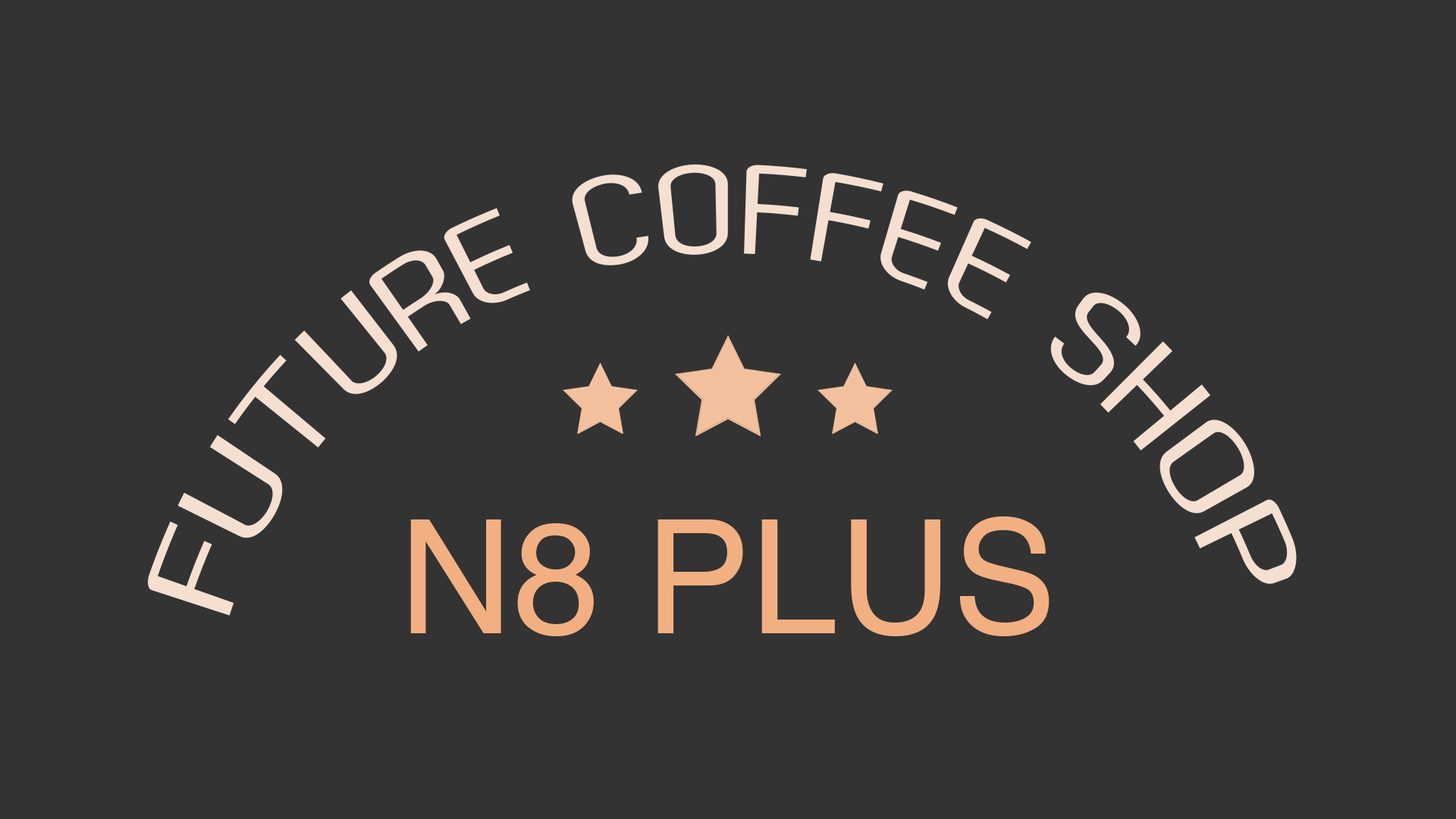
<style>
.page{position:relative;width:1456px;height:819px;background:#333333}
.page>*{position:absolute;margin:0}
.t1{font:126.4px "ZagRegular";color:#f5dfd0}
.t2{font:158px "Helvetica";color:#f2b082}
</style>
<div class="page">
<p class="t1" style="left:148px;top:164px;width:1149px;height:452px">FUTURE COFFEE SHOP</p>
<p class="t2" style="left:410px;top:516px;width:640px;height:120px">N8 PLUS</p>
</div>
